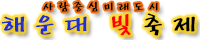
<style>
.page{position:relative;width:200px;height:40px;background:#ffffff}
.page>*{position:absolute;margin:0}
.t1{font:13px "HYbdaM";letter-spacing:0.16em;color:#000000}
.t2{font:27px "HYbdaM";letter-spacing:0.16em;color:#2030ce}
.t3{font:28px "HYbdaM";letter-spacing:0.16em;color:#ff0000}
.t4{font:27px "HYbdaM";letter-spacing:0.16em;color:#000000}
</style>
<div class="page">
<p class="t1" style="left:43px;top:1px;width:55px;height:11px">사람중심</p>
<p class="t1" style="left:104px;top:2px;width:54px;height:9px">미래도시</p>
<p class="t2" style="left:1px;top:13px;width:194px;height:23px">해운대 <span class="t3">빛</span><span class="t4">축제</span></p>
</div>
